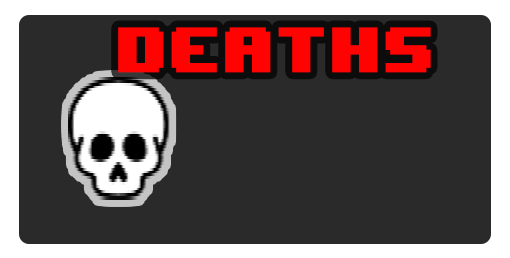
<style>
.page{position:relative;width:510px;height:258px;background:#2a2a2a}
.page>*{position:absolute;margin:0}
.t1{font:53.5px "8BITWONDERNominal";color:#ff0202}
</style>
<div class="page">
<p class="t1" style="left:118px;top:27px;width:313px;height:46px">DEATHS</p>
</div>
